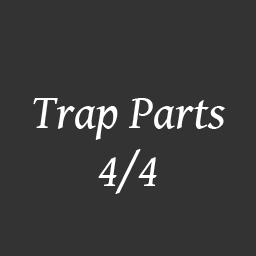
<style>
.page{position:relative;width:256px;height:256px;background:#333333}
.page>*{position:absolute;margin:0}
.t1{font:48px "GentiumBookBasic-Italic";color:#ffffff}
</style>
<div class="page">
<p class="t1" style="left:33px;top:98px;width:193px;height:96px;text-align:center">Trap Parts<br>4/4</p>
</div>
